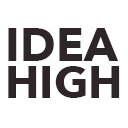
<style>
.page{position:relative;width:128px;height:128px;background:#ffffff}
.page>*{position:absolute;margin:0}
.t1{font:46.4px "AvenirNext-Bold";color:#2e2626}
.t2{font:44.7px "AvenirNext-Bold";color:#2e2626}
</style>
<div class="page">
<p class="t1" style="left:8px;top:28px;width:111px;height:33px">IDEA</p>
<p class="t2" style="left:8px;top:66px;width:112px;height:32px">HIGH</p>
</div>
